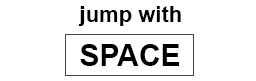
<style>
.page{position:relative;width:256px;height:81px;background:#ffffff}
.page>*{position:absolute;margin:0}
.t1{font:22px "Arial-BoldMT";color:#000000}
.t2{font:30px "Arial-BoldMT";color:#000000}
</style>
<div class="page">
<p class="t1" style="left:78px;top:6px;width:103px;height:20px">jump with</p>
<p class="t2" style="left:80px;top:44px;width:99px;height:22px">SPACE</p>
</div>
